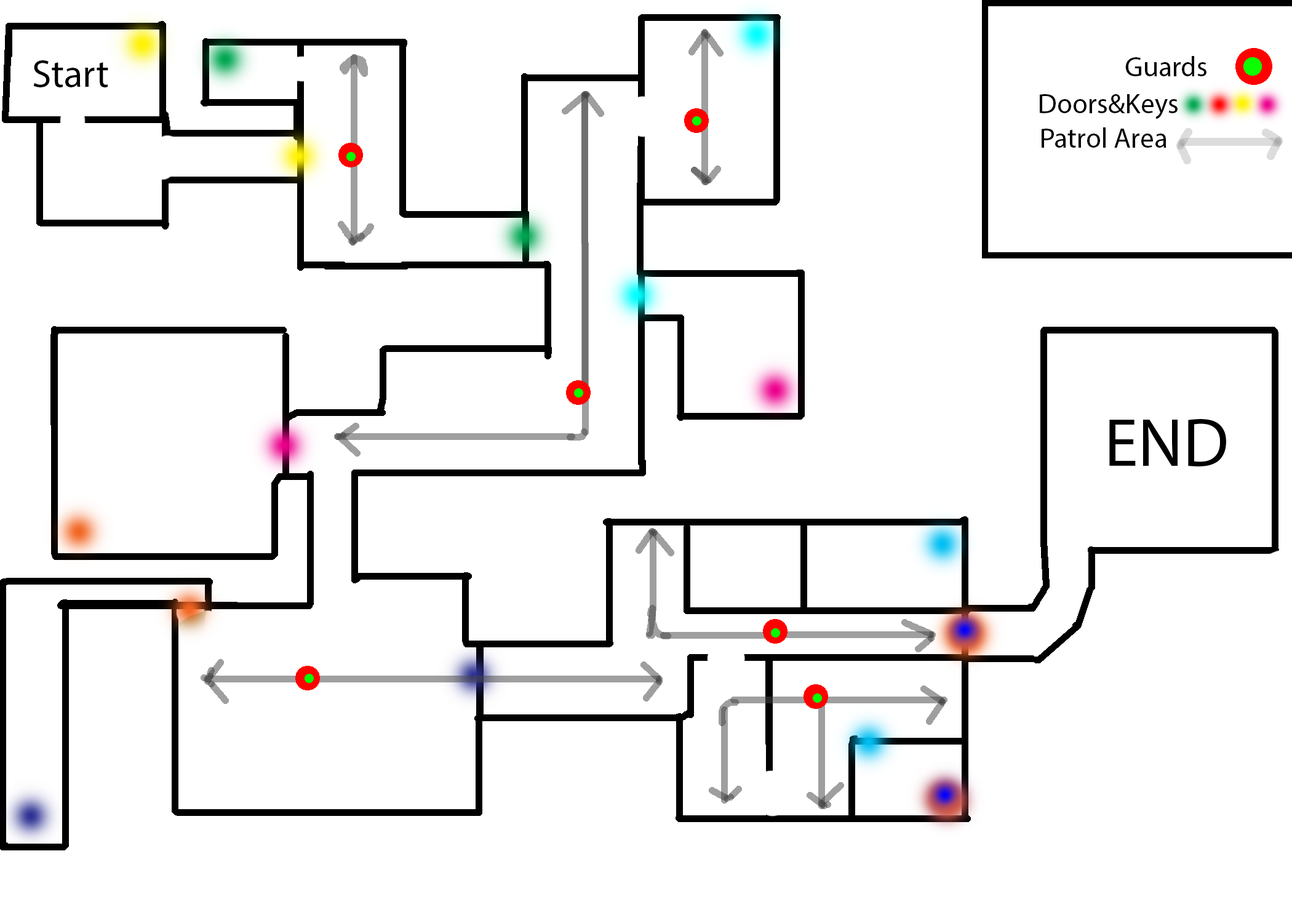
<style>
.page{position:relative;width:1292px;height:923px;background:#ffffff}
.page>*{position:absolute;margin:0}
.t1{font:38.8px "MyriadPro-Regular";color:#000000}
.t2{font:28.2px "MyriadPro-Regular";color:#000000}
.t3{font:68.4px "MyriadPro-Regular";color:#000000}
</style>
<div class="page">
<p class="t1" style="left:33px;top:60px;width:75px;height:27px">Start</p>
<p class="t2" style="left:1125px;top:56px;width:82px;height:20px">Guards</p>
<p class="t2" style="left:1040px;top:94px;width:138px;height:25px">Doors&amp;Keys</p>
<p class="t2" style="left:1042px;top:127px;width:125px;height:21px">Patrol Area</p>
<p class="t3" style="left:1109px;top:418px;width:117px;height:48px">END</p>
</div>
